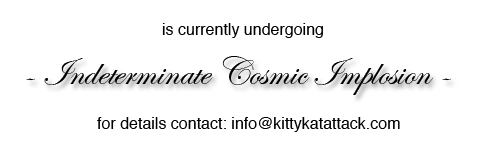
<style>
.page{position:relative;width:489px;height:158px;background:#ffffff}
.page>*{position:absolute;margin:0}
.t1{font:16px "Helvetica";color:#000000}
.t2{font:40px "EdwardianScriptITC";color:#000000}
</style>
<div class="page">
<p class="t1" style="left:162px;top:23px;width:161px;height:15px">is currently undergoing</p>
<p class="t2" style="left:26px;top:56px;width:426px;height:39px">- Indeterminate Cosmic Implosion -</p>
<p class="t1" style="left:97px;top:117px;width:303px;height:15px">for details contact: info@kittykatattack.com</p>
</div>
